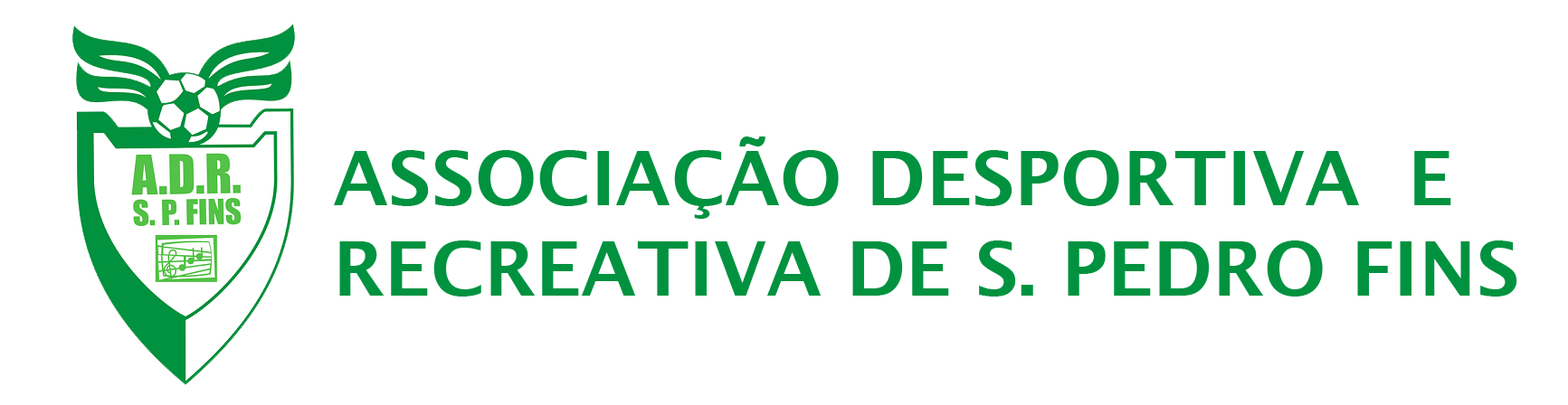
<style>
.page{position:relative;width:1568px;height:405px;background:#ffffff}
.page>*{position:absolute;margin:0}
.t1{font:75.4px "LucidaSans-Demi";color:#00923f}
</style>
<div class="page">
<p class="t1" style="left:334px;top:137px;width:1183px;height:160px">ASSOCIAÇÃO DESPORTIVA  E <br>RECREATIVA DE S. PEDRO FINS</p>
</div>
